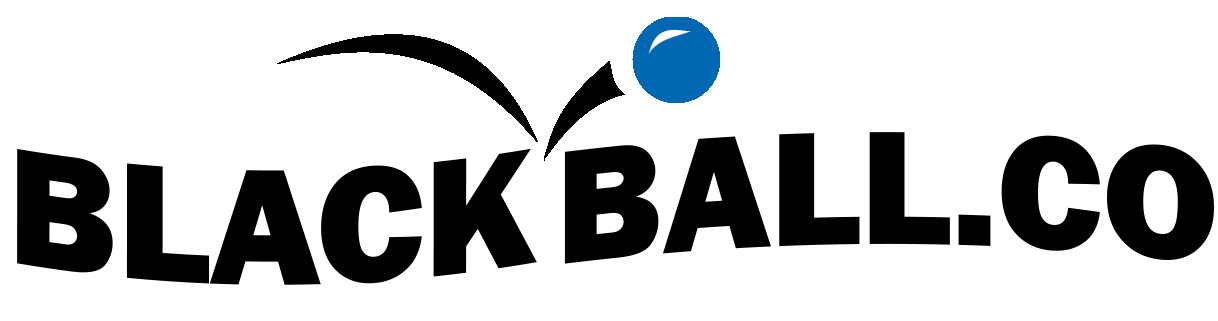
<style>
.page{position:relative;width:1218px;height:321px;background:#ffffff}
.page>*{position:absolute;margin:0}
.t1{font:167.5px "FranklinGothic-Heavy";color:#000000}
.t2{font:171.4px "FranklinGothic-Heavy";color:#000000}
</style>
<div class="page">
<p class="t1" style="left:564px;top:132px;width:650px;height:132px">BALL.CO</p>
<p class="t2" style="left:17px;top:148px;width:520px;height:137px">BLACK</p>
</div>
